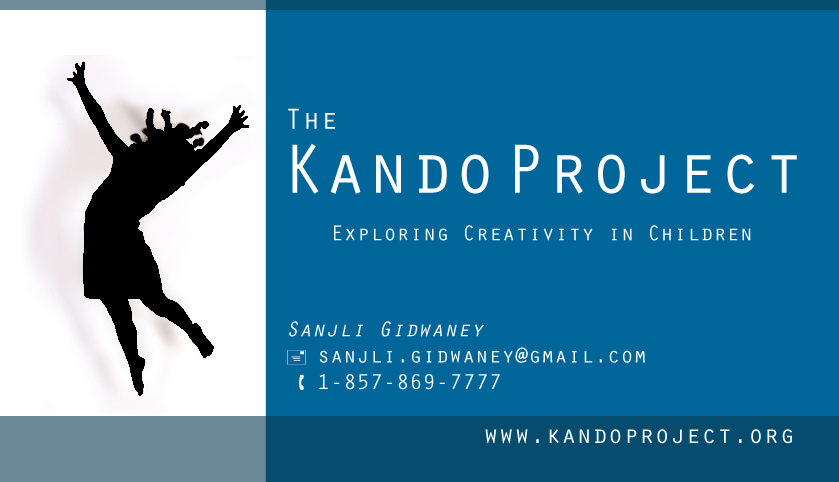
<style>
.page{position:relative;width:839px;height:482px;background:#006699}
.page>*{position:absolute;margin:0}
.t1{font:30px "OratorStd";color:#ffffff}
.t2{font:72px "OratorStd";color:#ffffff}
.t3{font:22px "OratorStd";color:#ffffff}
.t4{font:22px "OratorStd-Slanted";color:#ffffff}
.t5{font:22px "Webdings";color:#ffffff}
.t6{font:26px "OratorStd";color:#ffffff}
</style>
<div class="page">
<p class="t1" style="left:288px;top:108px;width:47px;height:21px">The</p>
<p class="t2" style="left:292px;top:143px;width:505px;height:51px">Kando Project</p>
<p class="t3" style="left:334px;top:225px;width:417px;height:16px">Exploring Creativity in Children</p>
<p class="t3" style="left:287px;top:321px;width:358px;height:69px"><span class="t4">Sanjli Gidwaney<br></span><span class="t5">  </span>sanjli.gidwaney@gmail.com<br><span class="t5"> Å </span>1-857-869-7777</p>
<p class="t6" style="left:485px;top:429px;width:307px;height:15px">www.kandoproject.org</p>
</div>
